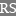
<style>
.page{position:relative;width:16px;height:16px;background:#797979}
.page>*{position:absolute;margin:0}
.t1{font:21.7px "ArabicTypesetting";color:#ffffff}
</style>
<div class="page">
<p class="t1" style="left:0px;top:3px;width:17px;height:10px">RS</p>
</div>
